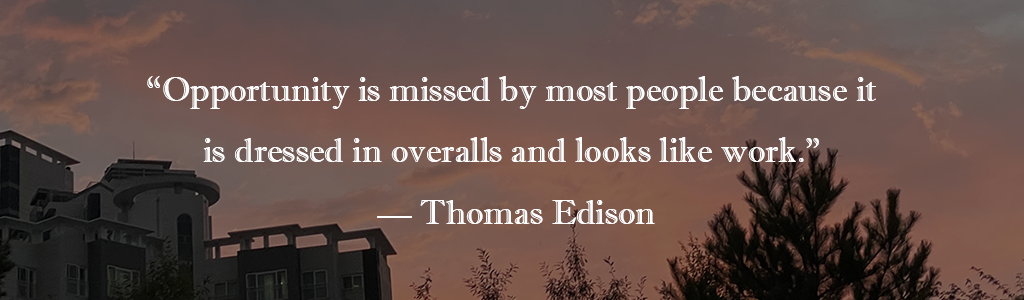
<style>
.page{position:relative;width:1024px;height:300px}
.page>*{position:absolute;margin:0}
.t1{font:35px "ImprintMT-Shadow";color:#ffffff}
</style>
<div class="page">
<p class="t1" style="left:147px;top:76px;width:729px;height:148px;text-align:center">“Opportunity is missed by most people because it <br>is dressed in overalls and looks like work.” <br>— Thomas Edison</p>
</div>
